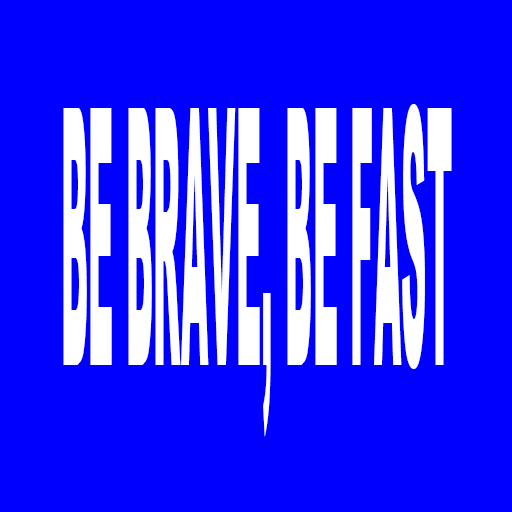
<style>
.page{position:relative;width:512px;height:512px;background:#0000ff}
.page>*{position:absolute;margin:0}
.t1{font:358.9px "Arial-Black";color:#ffffff;scale:0.1 1}
</style>
<div class="page">
<p class="t1" style="left:63px;top:104px;width:389px;height:333px">BE BRAVE, BE FAST</p>
</div>
